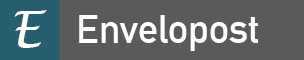
<style>
.page{position:relative;width:304px;height:60px;background:#5a5a5a}
.page>*{position:absolute;margin:0}
.t1{font:50px "LucidaHandwriting-Italic";color:#ffffff}
.t2{font:40px "DINAlternate-Bold";color:#ffffff}
</style>
<div class="page">
<p class="t1" style="left:14px;top:10px;width:33px;height:38px">E</p>
<p class="t2" style="left:79px;top:15px;width:179px;height:36px">Envelopost</p>
</div>
